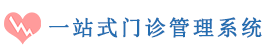
<style>
.page{position:relative;width:269px;height:49px;background:#ffffff}
.page>*{position:absolute;margin:0}
.t1{font:21.4px "SimSun";letter-spacing:0.1em;color:#256eb1;font-weight:bold}
</style>
<div class="page">
<p class="t1" style="left:49px;top:17px;width:213px;height:21px">一站式门诊管理系统</p>
</div>
